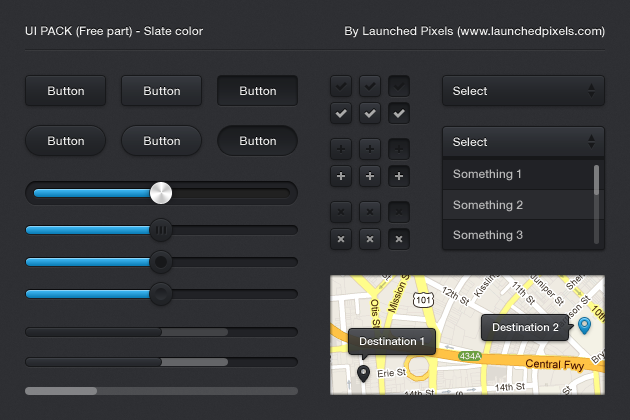
<style>
.page{position:relative;width:630px;height:420px;background:#2e2f33}
.page>*{position:absolute;margin:0}
.t1{font:12px "HelveticaNeue-Medium";color:#eeeeee}
.t2{font:12px "HelveticaNeue-Medium";color:#bbbbbb}
.t3{font:11px "HelveticaNeue-Medium";color:#ffffff}
</style>
<div class="page">
<p class="t1" style="left:25px;top:26px;width:178px;height:12px">UI PACK (Free part) - Slate color</p>
<p class="t1" style="left:345px;top:26px;width:260px;height:12px">By Launched Pixels (www.launchedpixels.com)</p>
<p class="t1" style="left:48px;top:86px;width:36px;height:9px">Button</p>
<p class="t1" style="left:144px;top:86px;width:36px;height:9px">Button</p>
<p class="t1" style="left:240px;top:86px;width:36px;height:9px">Button</p>
<p class="t1" style="left:453px;top:86px;width:34px;height:9px">Select</p>
<p class="t1" style="left:48px;top:136px;width:36px;height:9px">Button</p>
<p class="t1" style="left:144px;top:136px;width:36px;height:9px">Button</p>
<p class="t1" style="left:240px;top:136px;width:36px;height:9px">Button</p>
<p class="t1" style="left:453px;top:137px;width:34px;height:9px">Select</p>
<p class="t2" style="left:453px;top:169px;width:68px;height:12px">Something 1</p>
<p class="t2" style="left:453px;top:200px;width:70px;height:12px">Something 2</p>
<p class="t2" style="left:453px;top:230px;width:70px;height:12px">Something 3</p>
<p class="t3" style="left:493px;top:323px;width:66px;height:8px">Destination 2</p>
<p class="t3" style="left:360px;top:337px;width:64px;height:8px">Destination 1</p>
</div>
